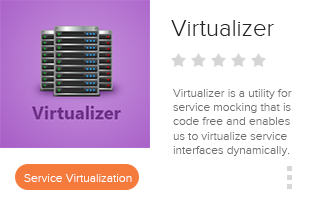
<style>
.page{position:relative;width:310px;height:206px;background:#ffffff}
.page>*{position:absolute;margin:0}
.t1{font:24px "ProximaNova-Light";color:#262626}
.t2{font:12px "ProximaNova-Light";color:#6e6e6e}
.t3{font:12px "ProximaNova-Light";color:#fffefe}
</style>
<div class="page">
<p class="t1" style="left:171px;top:20px;width:103px;height:16px">Virtualizer</p>
<p class="t2" style="left:173px;top:89px;width:119px;height:67px">Virtualizer is a utility for service mocking that is code free and enables us to virtualize service interfaces dynamically.</p>
<p class="t3" style="left:24px;top:174px;width:108px;height:8px">Service Virtualization</p>
</div>
